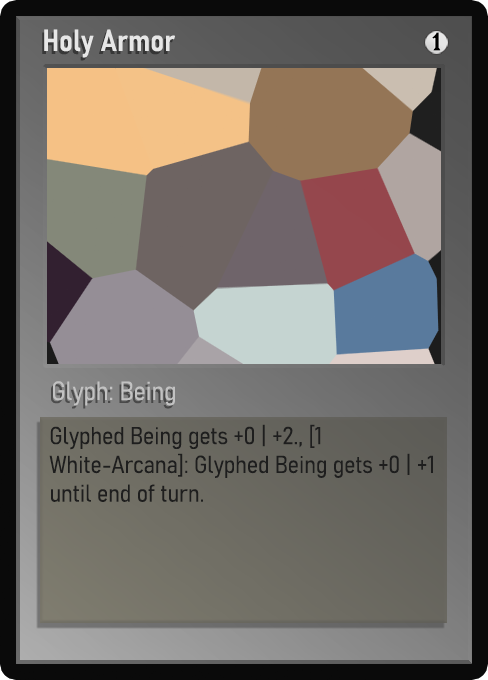
<style>
.page{position:relative;width:488px;height:680px}
.page>*{position:absolute;margin:0}
.t1{font:30px "Bahnschrift-SemiBoldSemiCondensed";color:#f2f2f2;font-weight:bold}
.t2{font:25px "WTRRoycroft";color:#000000;font-weight:bold;scale:1.09 1}
.t3{font:26px "Bahnschrift-LightSemiCondensed";color:#c8c8c8;font-weight:bold}
.t4{font:24px "Bahnschrift-LightSemiCondensed";color:#1e1e1e;font-weight:bold}
</style>
<div class="page">
<p class="t1" style="left:44px;top:29px;width:131px;height:29px;opacity:0.9">Holy Armor</p>
<p class="t2" style="left:432px;top:32px;width:9px;height:19px">1</p>
<p class="t3" style="left:53px;top:381px;width:122px;height:25px;opacity:0.9">Glyph: Being</p>
<p class="t4" style="left:49px;top:424px;width:384px;height:78px">Glyphed Being gets +0 | +2., [1 White-Arcana]: Glyphed Being gets +0 | +1 until end of turn.</p>
</div>
